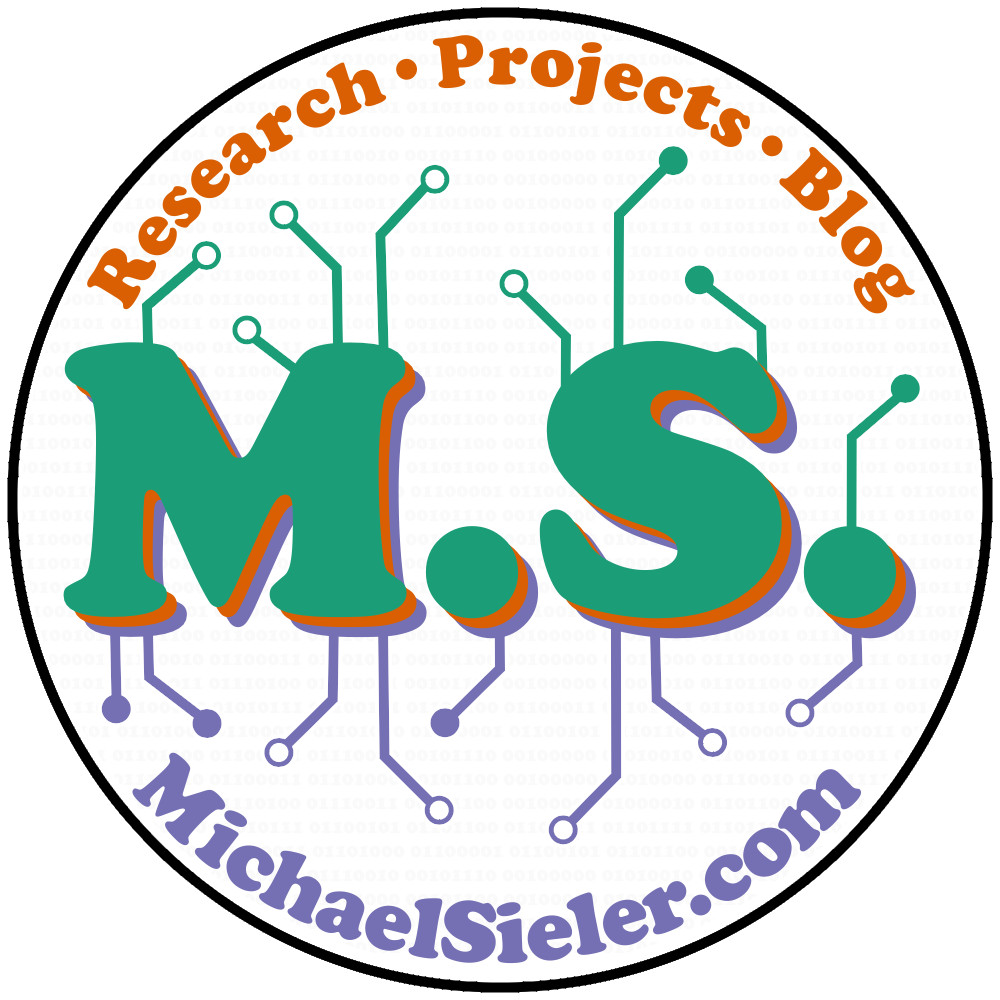
<style>
.page{position:relative;width:1000px;height:1000px;background:#ffffff}
.page>*{position:absolute;margin:0}
.t1{font:75px "CooperBlack";color:#d95f02}
.t2{font:400px "CooperBlack";color:#1b9e77}
.t3{font:90px "CooperBlack";color:#7570b3}
</style>
<div class="page">
<p class="t1" style="left:86px;top:34px;width:830px;height:280px;rotate:-180deg">Research•Projects•Blog</p>
<p class="t2" style="left:63px;top:340px;width:834px;height:279px">M.S.</p>
<p class="t2" style="left:73px;top:350px;width:834px;height:279px">M.S.</p>
<p class="t2" style="left:83px;top:360px;width:834px;height:279px">M.S.</p>
<p class="t3" style="left:130px;top:752px;width:734px;height:212px;text-align:center">M ichaelSieler.com</p>
</div>
